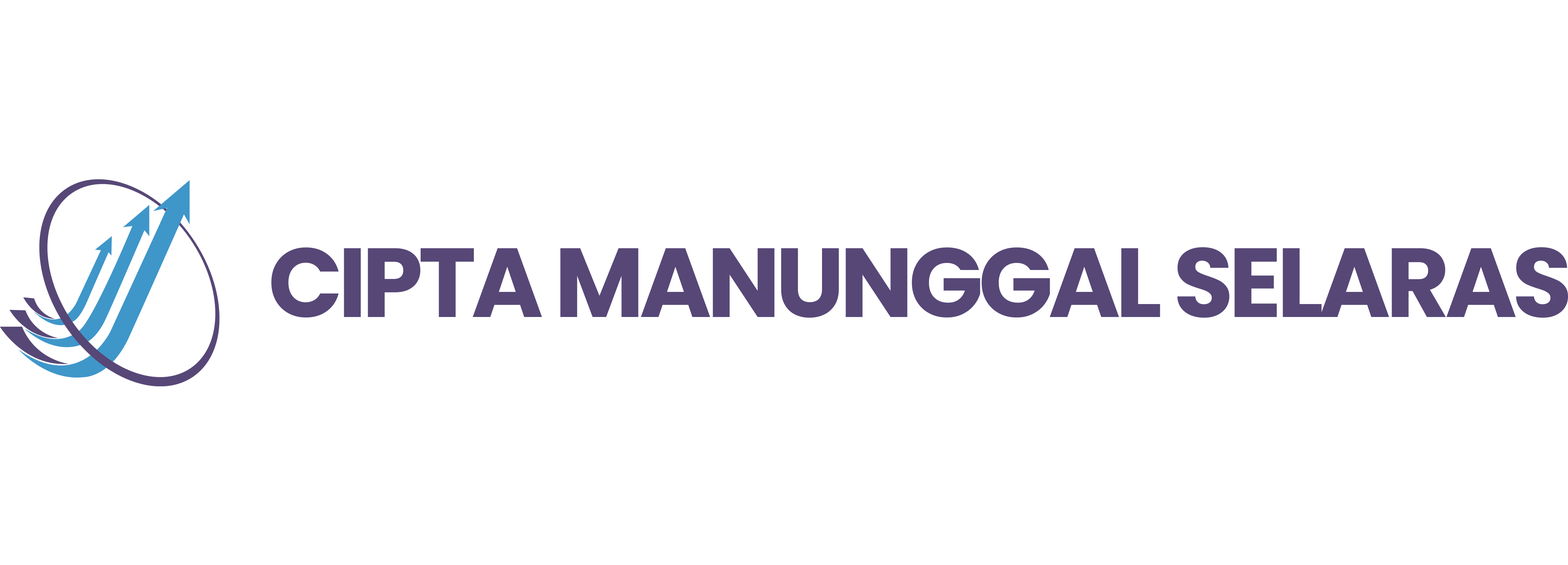
<style>
.page{position:relative;width:1568px;height:565px;background:#ffffff}
.page>*{position:absolute;margin:0}
.t1{font:98px "Poppins-Bold";letter-spacing:-0.05em;color:#564777}
</style>
<div class="page">
<p class="t1" style="left:271px;top:247px;width:1297px;height:71px">CIPTA MANUNGGAL SELARAS</p>
</div>
